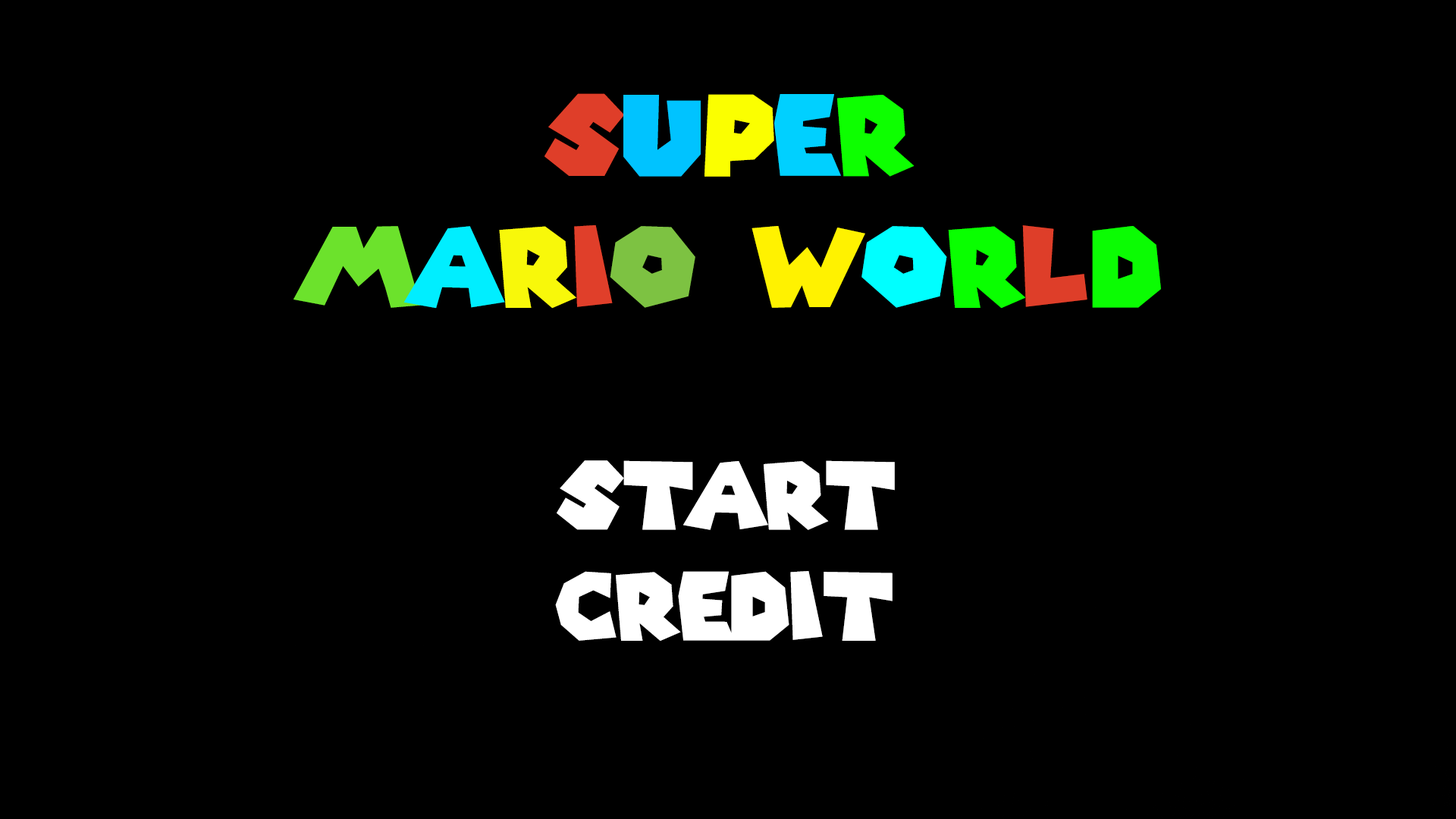
<style>
.page{position:relative;width:1456px;height:819px;background:#000000}
.page>*{position:absolute;margin:0}
.t1{font:92.5px "SuperMarioGalaxy";color:#ffffff}
.t2{font:109.8px "SuperMarioGalaxy";color:#df3e29}
.t3{font:109.8px "SuperMarioGalaxy";color:#00c3ff}
.t4{font:109.8px "SuperMarioGalaxy";color:#fbff00}
.t5{font:109.8px "SuperMarioGalaxy";color:#00d0ff}
.t6{font:109.8px "SuperMarioGalaxy";color:#0dff00}
.t7{font:109.8px "SuperMarioGalaxy";color:#6ce22c}
.t8{font:109.8px "SuperMarioGalaxy";color:#00eeff}
.t9{font:109.8px "SuperMarioGalaxy";color:#f8f80a}
.t10{font:109.8px "SuperMarioGalaxy";color:#e03f2a}
.t11{font:109.8px "SuperMarioGalaxy";color:#7dc242}
.t12{font:109.8px "SuperMarioGalaxy";color:#fff200}
.t13{font:109.8px "SuperMarioGalaxy";color:#00ffff}
.t14{font:109.8px "SuperMarioGalaxy";color:#09ff00}
.t15{font:109.8px "SuperMarioGalaxy";color:#de3e29}
.t16{font:109.8px "SuperMarioGalaxy";color:#0bfc03}
</style>
<div class="page">
<p class="t1" style="left:293px;top:93px;width:868px;height:548px;text-align:center"><span class="t2">s</span><span class="t3">u</span><span class="t4">p</span><span class="t5">e</span><span class="t6">r<br></span><span class="t7">m</span><span class="t8">a</span><span class="t9">r</span><span class="t10">i</span><span class="t11">o </span><span class="t12">w</span><span class="t13">o</span><span class="t14">r</span><span class="t15">l</span><span class="t16">d<br></span><br>START<br>CREDIT</p>
</div>
